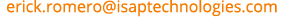
<style>
.page{position:relative;width:291px;height:20px;background:#ffffff}
.page>*{position:absolute;margin:0}
.t1{font:16px "OpenSans";color:#f57c00}
</style>
<div class="page">
<p class="t1" style="left:7px;top:0px;width:270px;height:17px">erick.romero@isaptechnologies.com</p>
</div>
